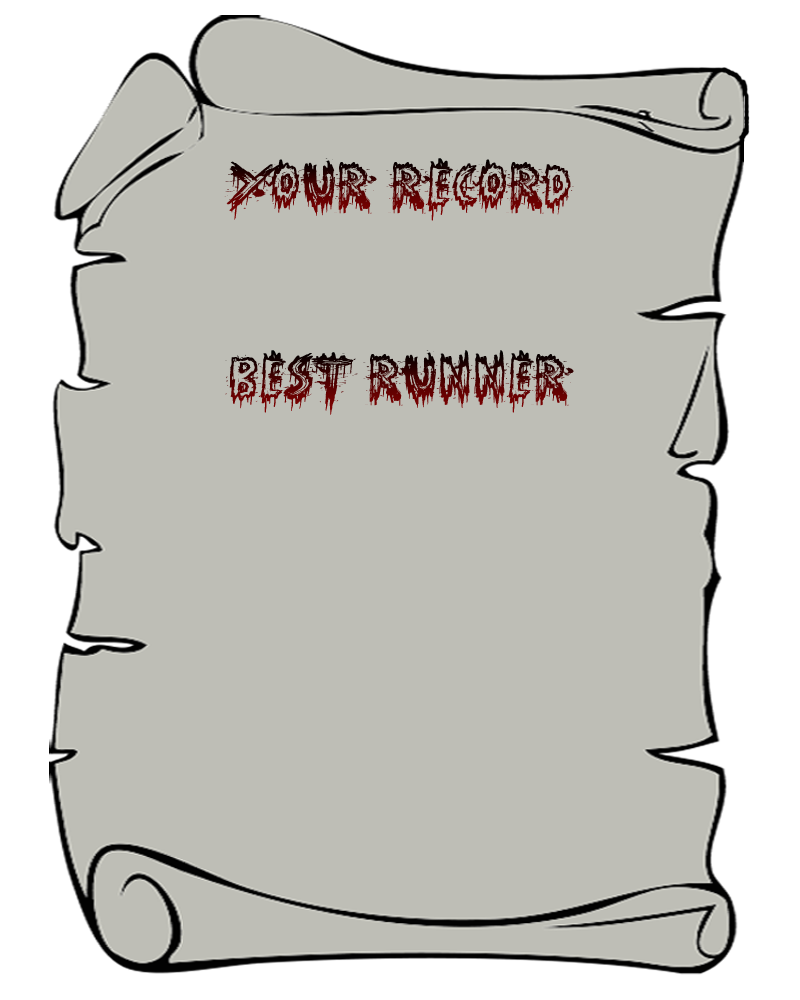
<style>
.page{position:relative;width:800px;height:1000px;background:#bebeb6}
.page>*{position:absolute;margin:0}
.t1{font:48px "Phantom-Ghost";scale:1.59 1}
</style>
<div class="page">
<p class="t1" style="left:224px;top:158px;width:350px;height:63px">your record</p>
<p class="t1" style="left:225px;top:350px;width:349px;height:65px">BEST RUNNER</p>
</div>
